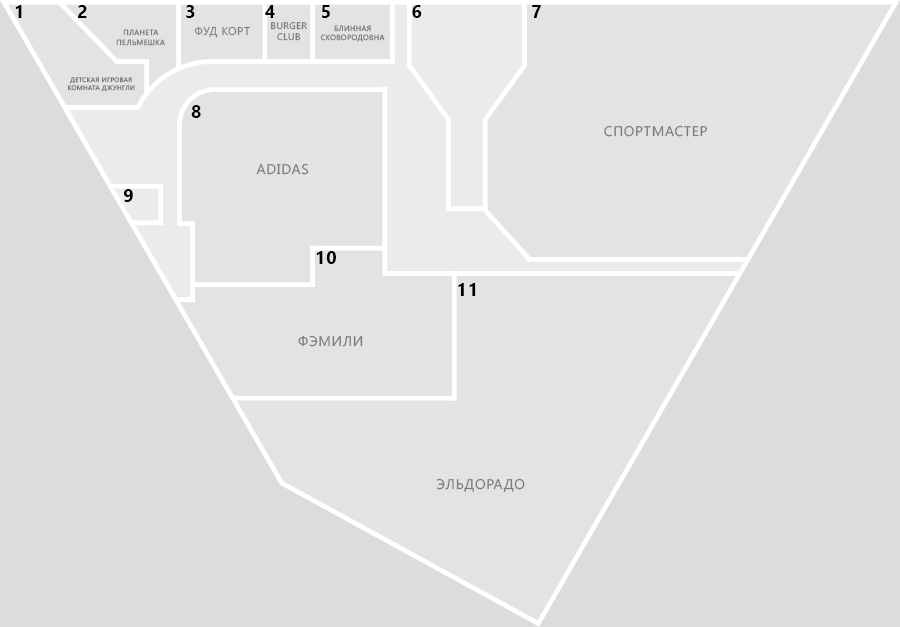
<style>
.page{position:relative;width:900px;height:627px;background:#e3e3e3}
.page>*{position:absolute;margin:0}
.t1{font:18px "SegoeUI-Bold";letter-spacing:0.05em;color:#000000;text-transform:uppercase}
.t2{font:7.5px "SegoeUI";letter-spacing:0.05em;color:#7c7c7c;text-transform:uppercase}
.t3{font:11.3px "SegoeUI";letter-spacing:0.05em;color:#7c7c7c;text-transform:uppercase}
.t4{font:9.4px "SegoeUI";letter-spacing:0.05em;color:#7c7c7c;text-transform:uppercase}
.t5{font:6.6px "SegoeUI";letter-spacing:0.05em;color:#7c7c7c;text-transform:uppercase}
.t6{font:14px "SegoeUI";letter-spacing:0.05em;color:#7c7c7c;text-transform:uppercase}
</style>
<div class="page">
<p class="t1" style="left:15px;top:5px;width:7px;height:13px">1</p>
<p class="t1" style="left:78px;top:5px;width:9px;height:13px">2</p>
<p class="t1" style="left:186px;top:5px;width:9px;height:13px">3</p>
<p class="t1" style="left:265px;top:5px;width:10px;height:13px">4</p>
<p class="t1" style="left:322px;top:5px;width:8px;height:13px">5</p>
<p class="t1" style="left:412px;top:5px;width:10px;height:13px">6</p>
<p class="t1" style="left:532px;top:5px;width:9px;height:13px">7</p>
<p class="t2" style="left:116px;top:29px;width:49px;height:17px;text-align:center">Планета<br>пельмешка</p>
<p class="t3" style="left:194px;top:26px;width:56px;height:12px">Фуд корт</p>
<p class="t4" style="left:271px;top:22px;width:36px;height:19px;text-align:center">Burger<br>Club</p>
<p class="t2" style="left:320px;top:25px;width:65px;height:17px;text-align:center">Блинная<br>сковородовна</p>
<p class="t5" style="left:68px;top:77px;width:67px;height:15px;text-align:center">Детская игровая<br>комната ДЖУНГЛИ</p>
<p class="t1" style="left:191px;top:105px;width:10px;height:13px">8</p>
<p class="t6" style="left:604px;top:125px;width:103px;height:12px">Спортмастер</p>
<p class="t6" style="left:256px;top:163px;width:53px;height:12px">Adidas</p>
<p class="t1" style="left:123px;top:189px;width:10px;height:13px">9</p>
<p class="t1" style="left:316px;top:251px;width:20px;height:13px">10</p>
<p class="t1" style="left:458px;top:283px;width:18px;height:13px">11</p>
<p class="t6" style="left:298px;top:335px;width:65px;height:12px">Фэмили</p>
<p class="t6" style="left:436px;top:478px;width:89px;height:14px">Эльдорадо</p>
</div>
